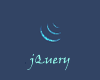
<style>
.page{position:relative;width:100px;height:80px;background:#324464}
.page>*{position:absolute;margin:0}
.t1{font:12px "VinerHandITC";color:#95feee}
</style>
<div class="page">
<p class="t1" style="left:27px;top:54px;width:43px;height:17px">jQuery</p>
</div>
